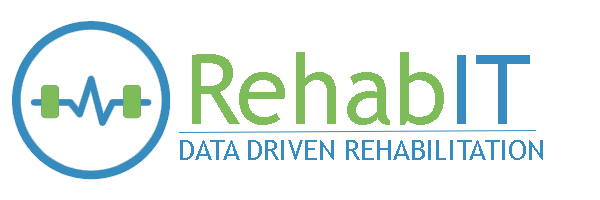
<style>
.page{position:relative;width:600px;height:200px;background:#ffffff}
.page>*{position:absolute;margin:0}
.t1{font:97.3px "TrebuchetMS";color:#7ebc59}
.t2{font:97.3px "TrebuchetMS";color:#368cbf}
.t3{font:28px "TrebuchetMS";color:#368cbf}
</style>
<div class="page">
<p class="t1" style="left:192px;top:52px;width:338px;height:73px">Rehab<span class="t2">IT</span></p>
<p class="t3" style="left:180px;top:140px;width:363px;height:20px">DATA DRIVEN REHABILITATION</p>
</div>
